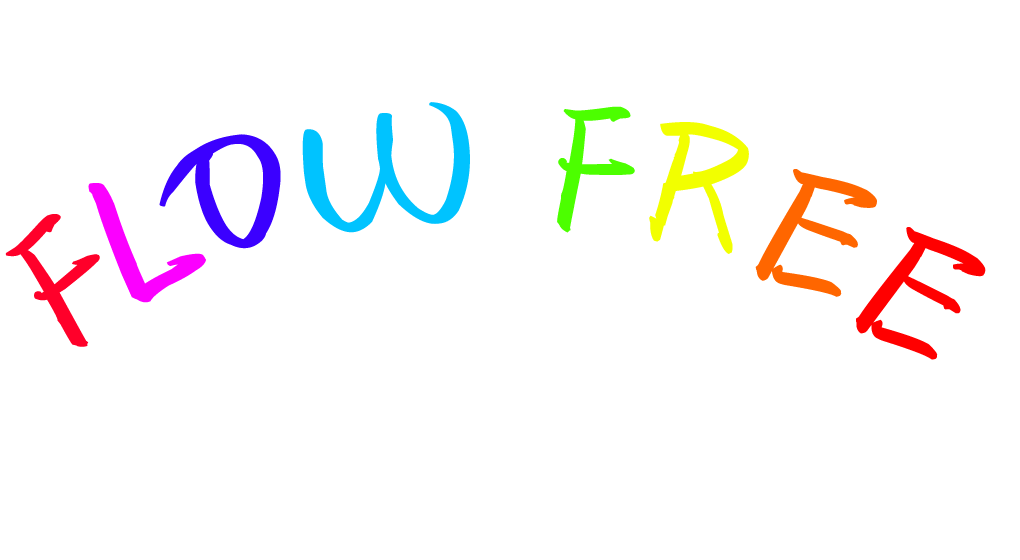
<style>
.page{position:relative;width:1020px;height:560px;background:#ffffff}
.page>*{position:absolute;margin:0}
.t1{font:182.7px "SentyZHAO";color:#00c3ff}
.t2{font:182.7px "SentyZHAO";color:#4cff00}
.t3{font:182.7px "SentyZHAO";color:#f2ff00}
.t4{font:182.7px "SentyZHAO";color:#3b00ff}
.t5{font:182.7px "SentyZHAO";color:#ff6600}
.t6{font:182.7px "SentyZHAO";color:#fb00ff}
.t7{font:182.7px "SentyZHAO";color:#ff002a}
.t8{font:182.7px "SentyZHAO";color:#ff0000}
</style>
<div class="page">
<p class="t1" style="left:302px;top:102px;width:168px;height:131px;rotate:-8deg">W</p>
<p class="t2" style="left:557px;top:106px;width:78px;height:127px;rotate:8deg">F</p>
<p class="t3" style="left:649px;top:122px;width:100px;height:132px;rotate:16deg">R</p>
<p class="t4" style="left:159px;top:134px;width:122px;height:115px;rotate:-32deg">O</p>
<p class="t5" style="left:755px;top:169px;width:122px;height:128px;rotate:24deg">E</p>
<p class="t6" style="left:88px;top:183px;width:118px;height:120px;rotate:-24deg">L</p>
<p class="t7" style="left:5px;top:214px;width:95px;height:133px;rotate:-32deg">F</p>
<p class="t8" style="left:856px;top:227px;width:130px;height:133px;rotate:32deg">E</p>
</div>
